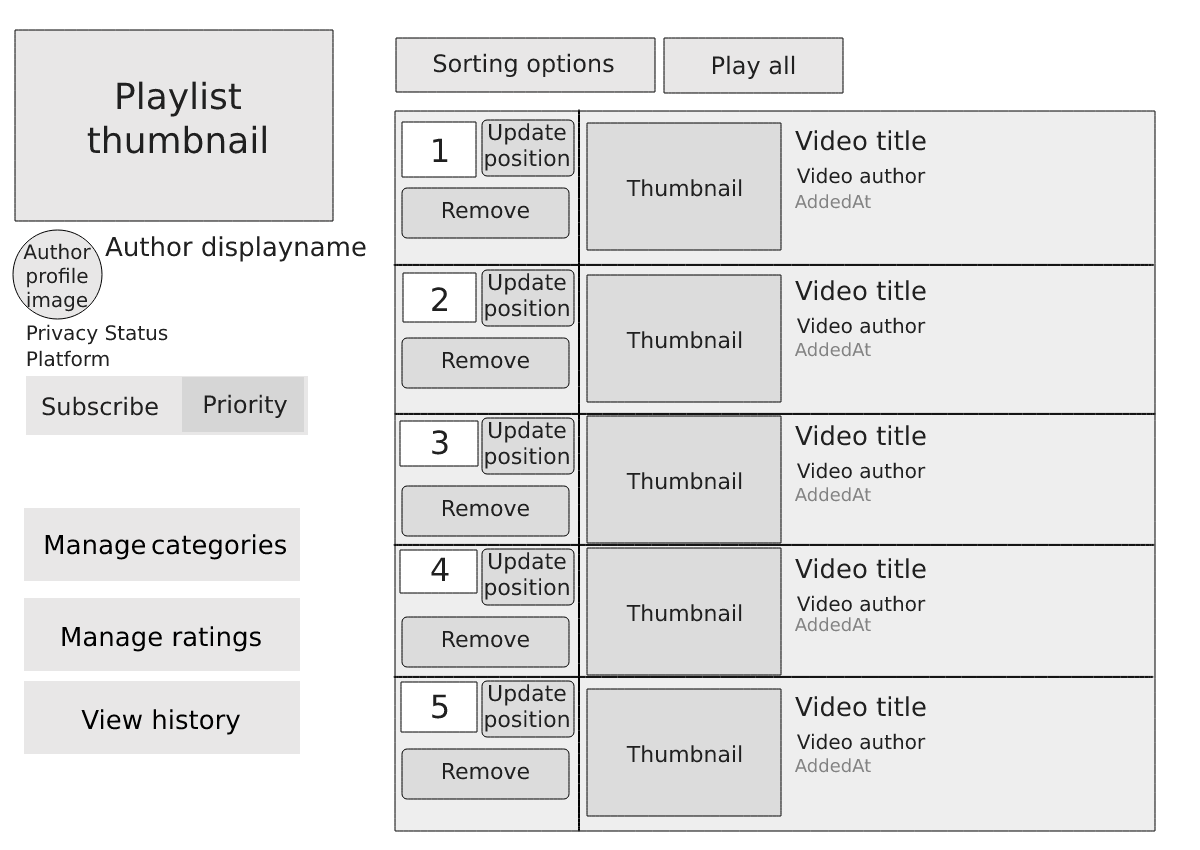
<style>
.page{position:relative;width:1200px;height:850px;background:#eeeeee}
.page>*{position:absolute;margin:0}
.t1{font:24px "DejaVuSans";color:#202020}
.t2{font:36px "DejaVuSans";color:#202020}
.t3{font:22px "DejaVuSans";color:#202020}
.t4{font:26px "DejaVuSans";color:#202020}
.t5{font:32px "DejaVuSans";color:#202020}
.t6{font:20px "DejaVuSans";color:#202020}
.t7{font:18px "DejaVuSans";color:#838383}
.t8{font:26px "DejaVuSans";color:#000000}
</style>
<div class="page">
<p class="t1" style="left:433px;top:53px;width:181px;height:24px">Sorting options</p>
<p class="t1" style="left:712px;top:55px;width:83px;height:24px">Play all</p>
<p class="t2" style="left:87px;top:81px;width:179px;height:73px;text-align:center">Playlist<br>thumbnail</p>
<p class="t3" style="left:485px;top:123px;width:84px;height:48px;text-align:center">Update<br>position</p>
<p class="t4" style="left:795px;top:130px;width:131px;height:21px">Video title</p>
<p class="t5" style="left:433px;top:138px;width:15px;height:24px">1</p>
<p class="t6" style="left:797px;top:167px;width:129px;height:17px">Video author</p>
<p class="t3" style="left:626px;top:179px;width:116px;height:18px">Thumbnail</p>
<p class="t7" style="left:794px;top:194px;width:77px;height:15px">AddedAt</p>
<p class="t3" style="left:442px;top:201px;width:87px;height:18px">Remove</p>
<p class="t6" style="left:23px;top:243px;width:68px;height:69px;text-align:center">Author<br>profile<br>image</p>
<p class="t4" style="left:105px;top:236px;width:261px;height:26px">Author displayname</p>
<p class="t3" style="left:485px;top:273px;width:84px;height:48px;text-align:center">Update<br>position</p>
<p class="t4" style="left:795px;top:280px;width:131px;height:21px">Video title</p>
<p class="t5" style="left:432px;top:287px;width:15px;height:24px">2</p>
<p class="t6" style="left:797px;top:317px;width:129px;height:17px">Video author</p>
<p class="t6" style="left:27px;top:324px;width:141px;height:21px">Privacy Status</p>
<p class="t3" style="left:626px;top:331px;width:116px;height:18px">Thumbnail</p>
<p class="t7" style="left:794px;top:342px;width:77px;height:15px">AddedAt</p>
<p class="t6" style="left:27px;top:350px;width:82px;height:17px">Platform</p>
<p class="t3" style="left:442px;top:351px;width:87px;height:18px">Remove</p>
<p class="t1" style="left:42px;top:396px;width:116px;height:20px">Subscribe</p>
<p class="t1" style="left:204px;top:394px;width:83px;height:24px">Priority</p>
<p class="t3" style="left:485px;top:421px;width:84px;height:48px;text-align:center">Update<br>position</p>
<p class="t4" style="left:795px;top:425px;width:131px;height:21px">Video title</p>
<p class="t5" style="left:432px;top:430px;width:16px;height:25px">3</p>
<p class="t6" style="left:797px;top:462px;width:129px;height:17px">Video author</p>
<p class="t3" style="left:626px;top:472px;width:116px;height:18px">Thumbnail</p>
<p class="t7" style="left:794px;top:487px;width:77px;height:15px">AddedAt</p>
<p class="t3" style="left:442px;top:499px;width:87px;height:18px">Remove</p>
<p class="t8" style="left:45px;top:534px;width:242px;height:26px">Manage categories</p>
<p class="t5" style="left:431px;top:557px;width:18px;height:24px">4</p>
<p class="t3" style="left:485px;top:552px;width:84px;height:48px;text-align:center">Update<br>position</p>
<p class="t4" style="left:795px;top:558px;width:131px;height:21px">Video title</p>
<p class="t3" style="left:626px;top:604px;width:116px;height:18px">Thumbnail</p>
<p class="t6" style="left:797px;top:595px;width:129px;height:17px">Video author</p>
<p class="t7" style="left:794px;top:617px;width:77px;height:15px">AddedAt</p>
<p class="t8" style="left:62px;top:626px;width:199px;height:26px">Manage ratings</p>
<p class="t3" style="left:442px;top:630px;width:87px;height:18px">Remove</p>
<p class="t3" style="left:485px;top:684px;width:84px;height:48px;text-align:center">Update<br>position</p>
<p class="t5" style="left:432px;top:694px;width:16px;height:25px">5</p>
<p class="t4" style="left:795px;top:696px;width:131px;height:21px">Video title</p>
<p class="t8" style="left:81px;top:709px;width:159px;height:26px">View history</p>
<p class="t6" style="left:797px;top:733px;width:129px;height:17px">Video author</p>
<p class="t3" style="left:626px;top:745px;width:116px;height:18px">Thumbnail</p>
<p class="t7" style="left:794px;top:758px;width:77px;height:15px">AddedAt</p>
<p class="t3" style="left:442px;top:762px;width:87px;height:18px">Remove</p>
</div>
